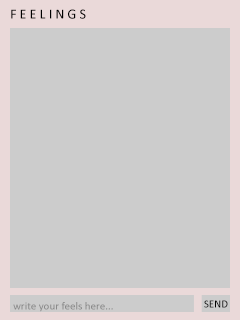
<style>
.page{position:relative;width:240px;height:320px;background:#cccccc}
.page>*{position:absolute;margin:0}
.t1{font:14px "Calibri";color:#000000}
.t2{font:11px "Calibri";color:#8a8a8a}
.t3{font:11px "Calibri";color:#000000}
</style>
<div class="page">
<p class="t1" style="left:11px;top:9px;width:75px;height:10px">F E E L I N G S</p>
<p class="t2" style="left:13px;top:302px;width:100px;height:10px">write your feels here...</p>
<p class="t3" style="left:204px;top:300px;width:24px;height:8px">SEND</p>
</div>
